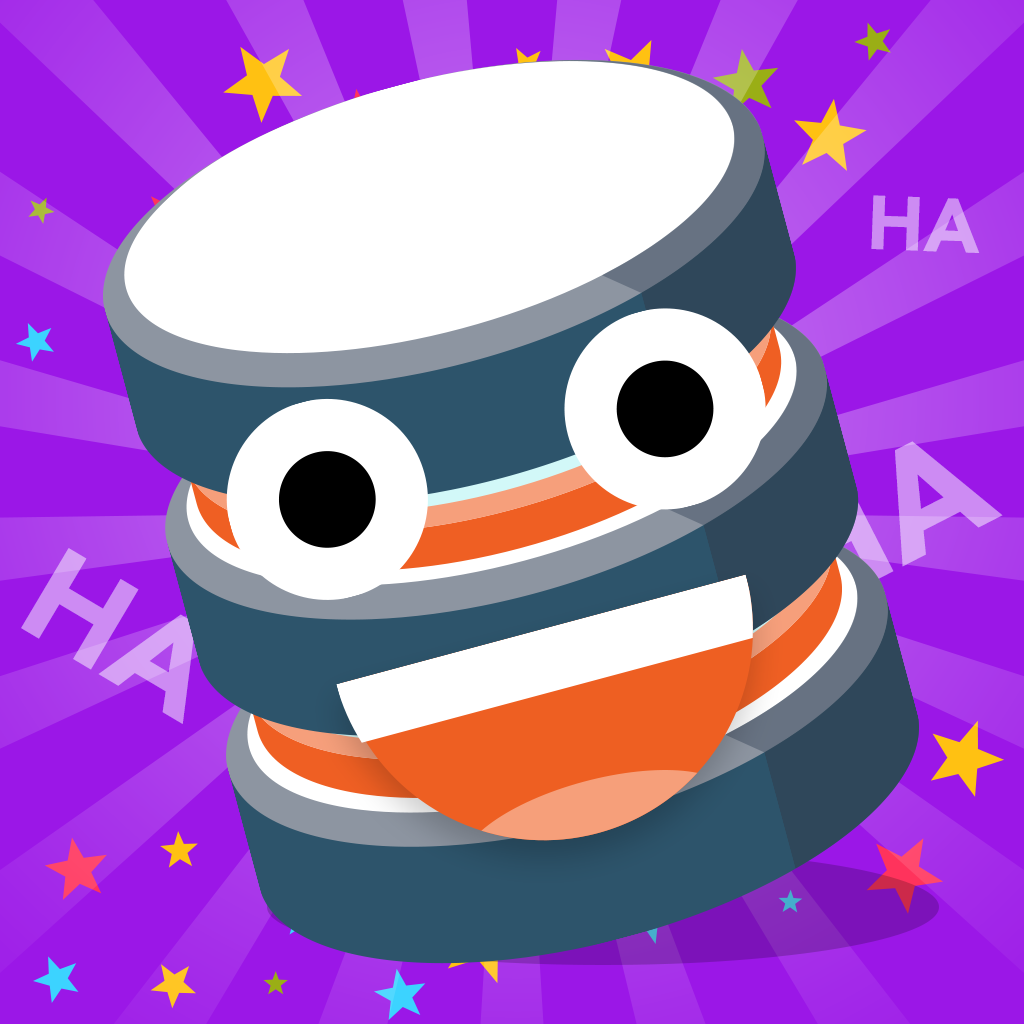
<style>
.page{position:relative;width:1024px;height:1024px;background:#9b17e7}
.page>*{position:absolute;margin:0}
.t1{font:75.5px "Avenir-Black";text-transform:uppercase}
.t2{font:150.3px "Avenir-Black";text-transform:uppercase}
.t3{font:131.2px "Avenir-Black";text-transform:uppercase}
</style>
<div class="page">
<p class="t1" style="left:871px;top:195px;width:109px;height:58px;rotate:2deg">Ha</p>
<p class="t2" style="left:762px;top:441px;width:241px;height:173px;rotate:-27deg">Ha</p>
<p class="t3" style="left:21px;top:548px;width:175px;height:176px;rotate:31deg">Ha</p>
</div>
